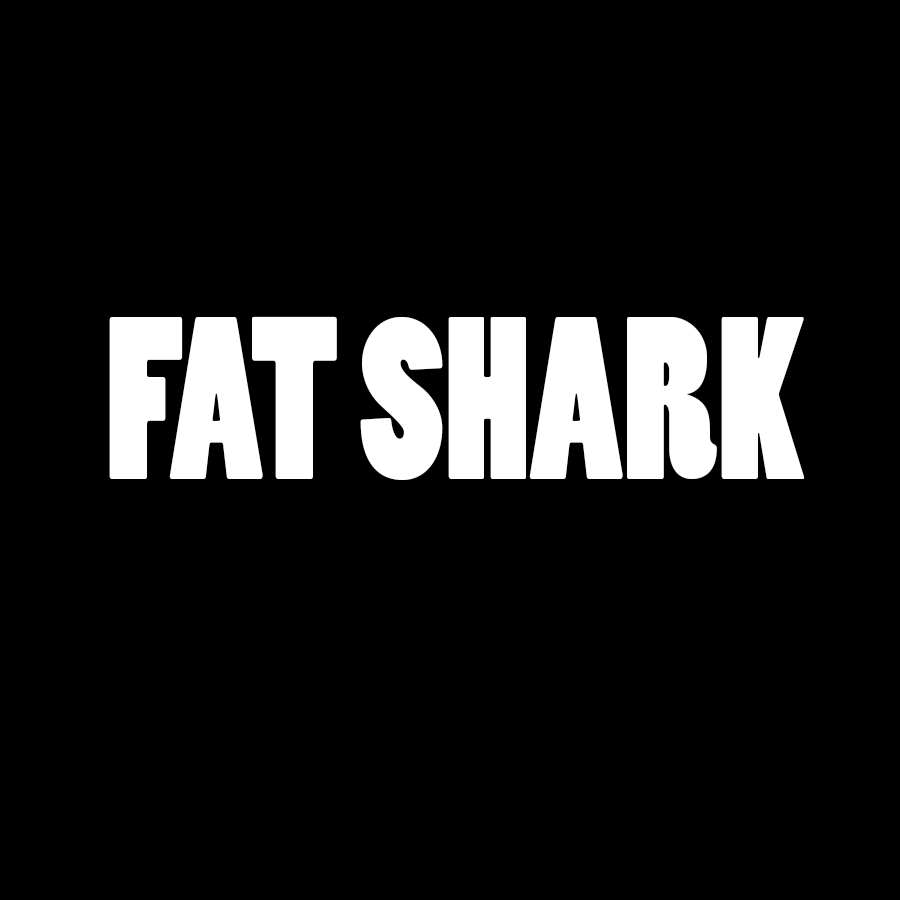
<style>
.page{position:relative;width:900px;height:900px;background:#000000}
.page>*{position:absolute;margin:0}
.t1{font:216.1px "PoplarStd";color:#ffffff;scale:0.87 1}
</style>
<div class="page">
<p class="t1" style="left:109px;top:316px;width:696px;height:164px">FAT SHARK</p>
</div>
